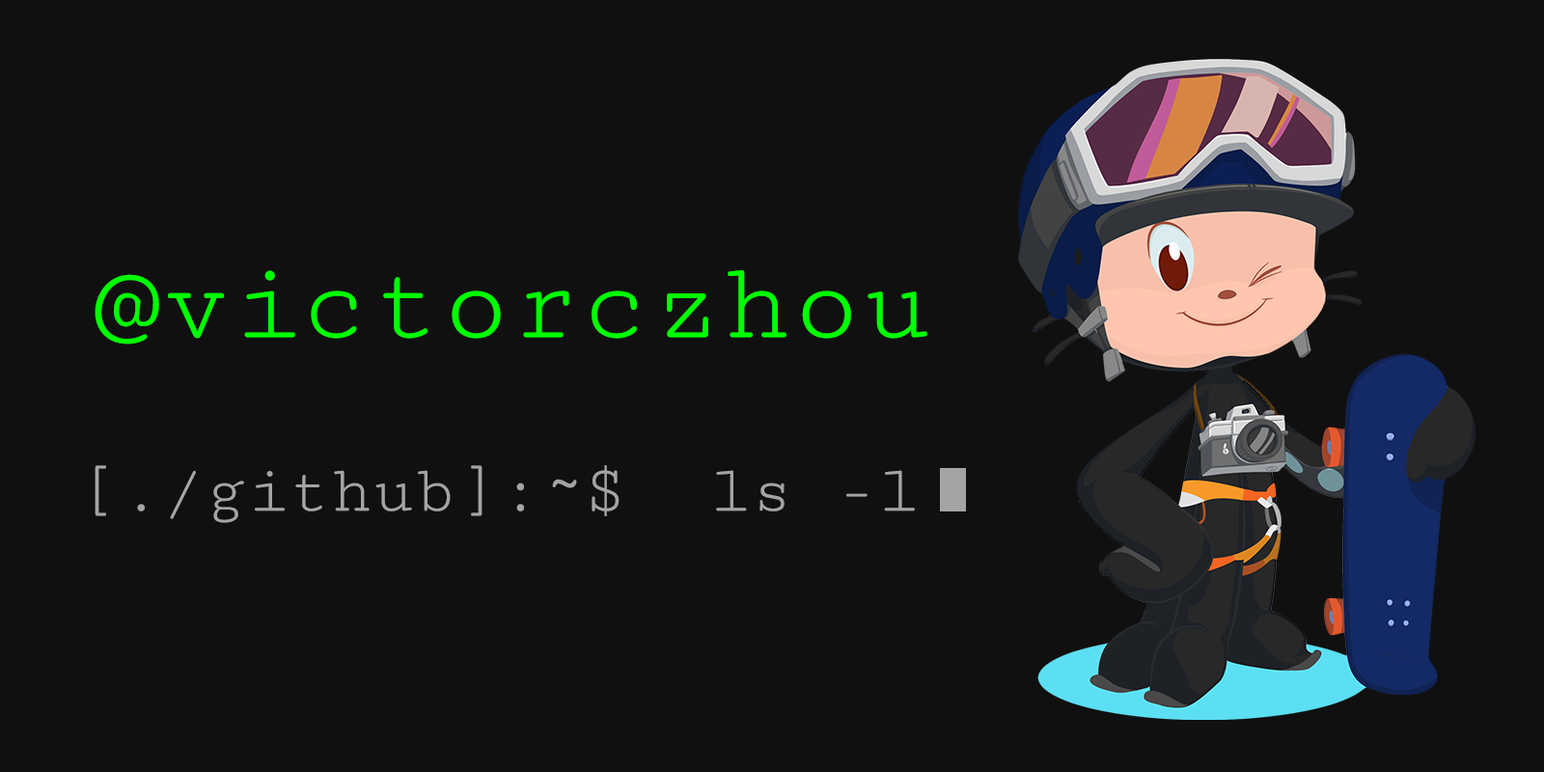
<style>
.page{position:relative;width:1544px;height:772px;background:#101010}
.page>*{position:absolute;margin:0}
.t1{font:115.8px "CutiveMono-Regular";color:#00ff00}
.t2{font:69.5px "CutiveMono-Regular";color:#a4a4a4}
</style>
<div class="page">
<p class="t1" style="left:95px;top:270px;width:833px;height:75px">@victorczhou</p>
<p class="t2" style="left:95px;top:465px;width:820px;height:58px">[./github]:~$  ls -l</p>
</div>
